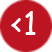
<style>
.page{position:relative;width:52px;height:52px;background:#bc1521}
.page>*{position:absolute;margin:0}
.t1{font:32px "ComicSansMS";color:#ffffff}
</style>
<div class="page">
<p class="t1" style="left:11px;top:11px;width:25px;height:24px">&lt;1</p>
</div>
